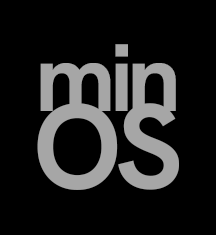
<style>
.page{position:relative;width:216px;height:235px;background:#000000}
.page>*{position:absolute;margin:0}
.t1{font:95.6px/76.6px "HankenGrotesk-Bold";letter-spacing:-0.06em;color:#a6a6a6}
.t2{font:118.7px/76.6px "HankenGrotesk-Bold";letter-spacing:-0.06em;color:#a6a6a6}
</style>
<div class="page">
<p class="t1" style="left:37px;top:44px;width:142px;height:146px;text-align:center">min<br><span class="t2">OS</span></p>
</div>
